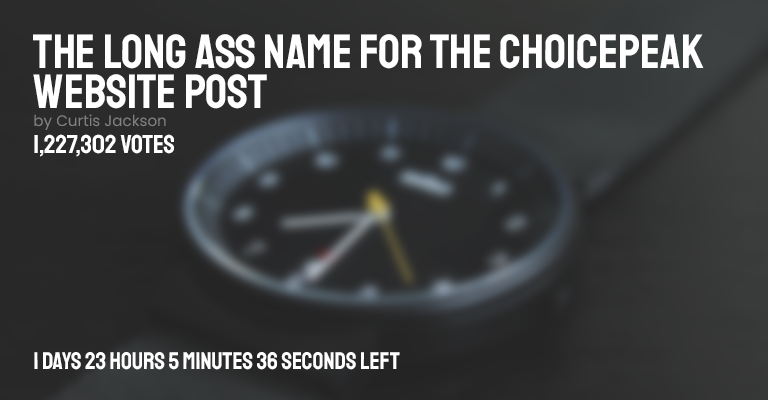
<style>
.page{position:relative;width:768px;height:400px}
.page>*{position:absolute;margin:0}
.t1{font:48.1px/40px "Staatliches-Regular";color:#ffffff}
.t2{font:15.1px "Poppins-Regular";color:#818181}
.t3{font:25.9px "Staatliches-Regular";color:#ffffff}
.t4{font:24px "Staatliches-Regular";color:#ffffff}
</style>
<div class="page">
<p class="t1" style="left:33px;top:34px;width:671px;height:75px">THE LONG ASS NAME FOR THE choicepeak<br>WEBSITE POST</p>
<p class="t2" style="left:34px;top:114px;width:132px;height:16px">by Curtis Jackson</p>
<p class="t3" style="left:34px;top:134px;width:140px;height:23px">1,227,302 votes</p>
<p class="t4" style="left:34px;top:352px;width:366px;height:18px">1 days 23 hours 5 minutes 36 seconds left</p>
</div>
